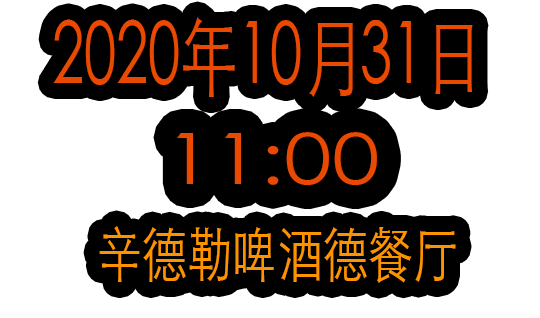
<style>
.page{position:relative;width:540px;height:318px;background:#000000}
.page>*{position:absolute;margin:0}
.t1{font:85.7px "STHeitiSC-Light";color:#e94900;scale:0.68 1}
.t2{font:69.6px "STHeitiSC-Light";color:#e94900;scale:1.24 1}
.t3{font:60.4px "STHeitiSC-Light";color:#fd9300;scale:0.75 1}
</style>
<div class="page">
<p class="t1" style="left:53px;top:17px;width:420px;height:80px">2020年10月31日</p>
<p class="t2" style="left:177px;top:132px;width:200px;height:53px">11:00</p>
<p class="t3" style="left:99px;top:226px;width:357px;height:57px">辛德勒啤酒德餐厅</p>
</div>
